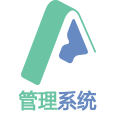
<style>
.page{position:relative;width:118px;height:113px;background:#ffffff}
.page>*{position:absolute;margin:0}
.t1{font:20px "MicrosoftYaHei";color:#6bc5a4;font-weight:bold;scale:0.95 1}
.t2{font:20px "MicrosoftYaHei";color:#698ac0;font-weight:bold;scale:0.95 1}
</style>
<div class="page">
<p class="t1" style="left:18px;top:90px;width:79px;height:21px">管理<span class="t2">系统</span></p>
</div>
